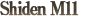
<style>
.page{position:relative;width:90px;height:18px;background:#ffffff}
.page>*{position:absolute;margin:0}
.t1{font:18px "RyuminPro-ExBold";letter-spacing:-0.08em;color:#4a3f32;font-weight:bold;scale:0.9 1}
</style>
<div class="page">
<p class="t1" style="left:0px;top:1px;width:79px;height:15px">Shiden M11</p>
</div>
